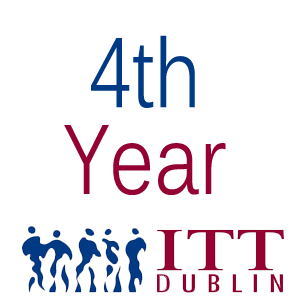
<style>
.page{position:relative;width:300px;height:300px;background:#ffffff}
.page>*{position:absolute;margin:0}
.t1{font:97.1px/86.9px "Kalinga";color:#930232;scale:0.79 1}
.t2{font:97.1px/86.9px "Kalinga";color:#003a84;scale:0.79 1}
</style>
<div class="page">
<p class="t1" style="left:64px;top:35px;width:162px;height:160px;text-align:center"><span class="t2">4th<br></span>Year</p>
</div>
